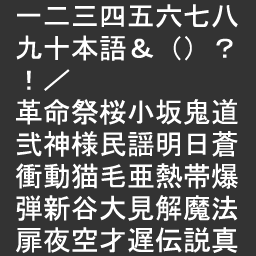
<style>
.page{position:relative;width:256px;height:256px;background:#333333}
.page>*{position:absolute;margin:0}
.t1{font:28px "MS-Gothic";color:#ffffff}
</style>
<div class="page">
<p class="t1" style="left:15px;top:4px;width:223px;height:249px">一二三四五六七八<br>九十本語＆（）？<br>！／<br>革命祭桜小坂鬼道<br>弐神様民謡明日蒼<br>衝動猫毛亜熱帯爆<br>弾新谷大見解魔法<br>扉夜空才遅伝説真</p>
</div>
